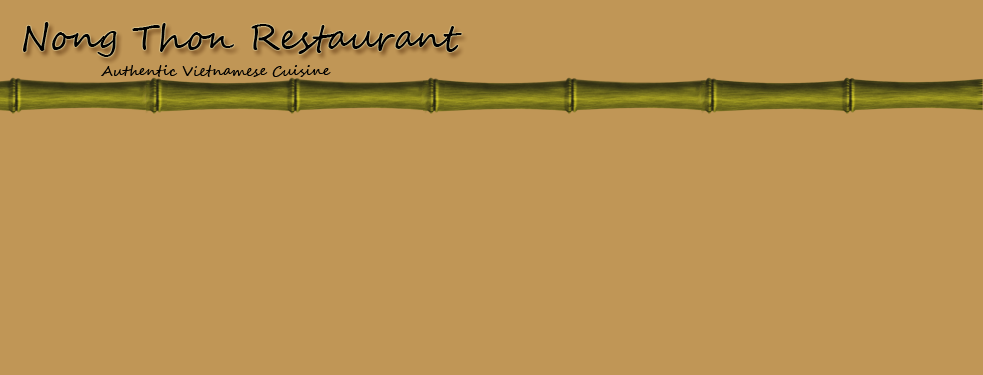
<style>
.page{position:relative;width:983px;height:375px;background:#c09656}
.page>*{position:absolute;margin:0}
.t1{font:36px "SegoeScript";color:#000000}
.t2{font:14px "SegoeScript";color:#000000}
</style>
<div class="page">
<p class="t1" style="left:23px;top:22px;width:439px;height:35px">Nong Thon Restaurant</p>
<p class="t2" style="left:101px;top:65px;width:230px;height:12px">Authentic Vietnamese Cuisine</p>
</div>
